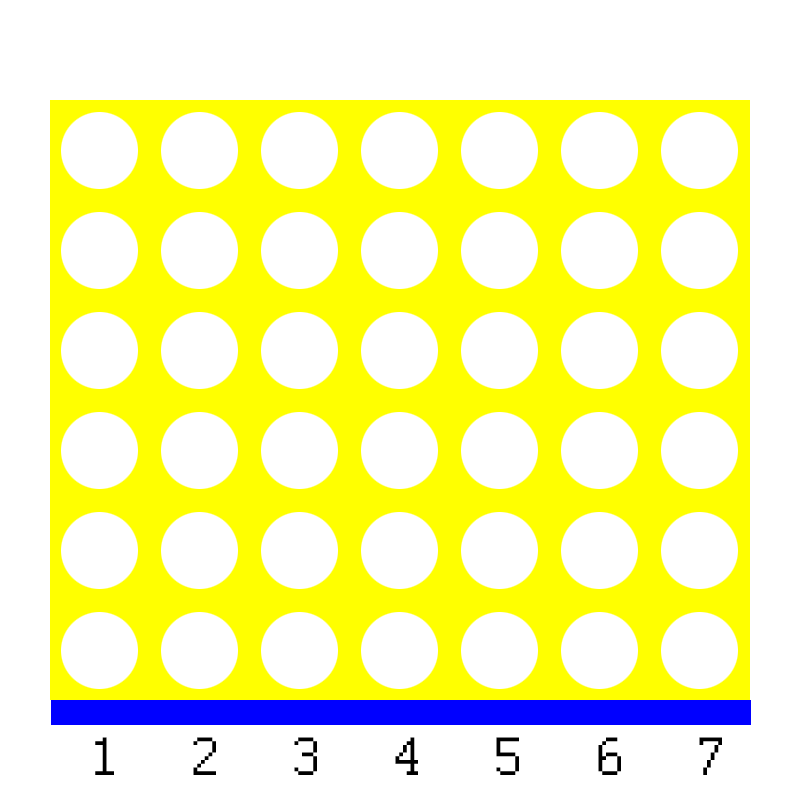
<style>
.page{position:relative;width:800px;height:800px;background:#ffffff}
.page>*{position:absolute;margin:0}
.t1{font:60px "Courier";color:#000000}
</style>
<div class="page">
<p class="t1" style="left:95px;top:737px;width:627px;height:38px">1  2  3  4  5  6  7</p>
</div>
